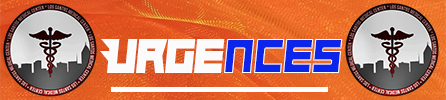
<style>
.page{position:relative;width:446px;height:100px}
.page>*{position:absolute;margin:0}
.t1{font:50px "Hindsight2020";color:#fbfbfb;scale:0.92 1}
.t2{font:50px "Hindsight2020";color:#0b25eb;scale:0.92 1}
</style>
<div class="page">
<p class="t1" style="left:100px;top:39px;width:125px;height:34px">Urge</p>
<p class="t2" style="left:224px;top:39px;width:119px;height:34px">nces</p>
</div>
